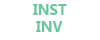
<style>
.page{position:relative;width:100px;height:40px;background:#ffffff}
.page>*{position:absolute;margin:0}
.t1{font:15px "SegoeUI-Bold";color:#6ec59d}
</style>
<div class="page">
<p class="t1" style="left:33px;top:4px;width:34px;height:11px">INST</p>
<p class="t1" style="left:36px;top:21px;width:27px;height:11px">INV</p>
</div>
